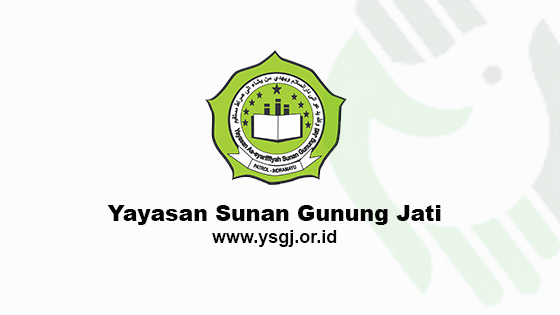
<style>
.page{position:relative;width:560px;height:315px;background:#fcfcfd}
.page>*{position:absolute;margin:0}
.t1{font:22px "Arial-Black";color:#030303}
.t2{font:18px "Arial-BoldMT";color:#030303}
</style>
<div class="page">
<p class="t1" style="left:107px;top:205px;width:334px;height:42px;text-align:center">Yayasan Sunan Gunung Jati<br><span class="t2">www.ysgj.or.id</span></p>
</div>
